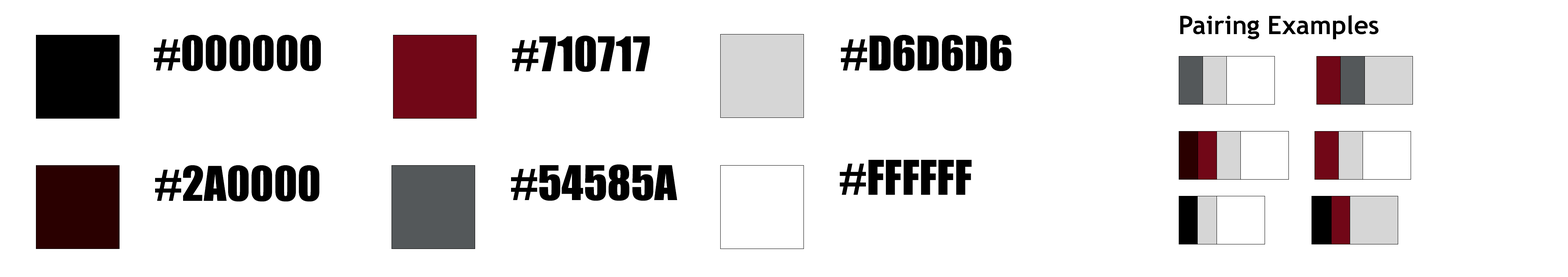
<style>
.page{position:relative;width:1568px;height:277px;background:#ffffff}
.page>*{position:absolute;margin:0}
.t1{font:25.5px "TrebuchetMS-Bold";color:#000000}
.t2{font:44.1px "Impact";color:#000000}
</style>
<div class="page">
<p class="t1" style="left:1180px;top:15px;width:198px;height:24px">Pairing Examples</p>
<p class="t2" style="left:154px;top:35px;width:167px;height:36px">#000000</p>
<p class="t2" style="left:512px;top:36px;width:138px;height:36px">#710717</p>
<p class="t2" style="left:841px;top:35px;width:171px;height:36px">#D6D6D6</p>
<p class="t2" style="left:840px;top:159px;width:132px;height:35px">#FFFFFF</p>
<p class="t2" style="left:155px;top:165px;width:165px;height:36px">#2A0000</p>
<p class="t2" style="left:511px;top:164px;width:166px;height:36px">#54585A</p>
</div>
